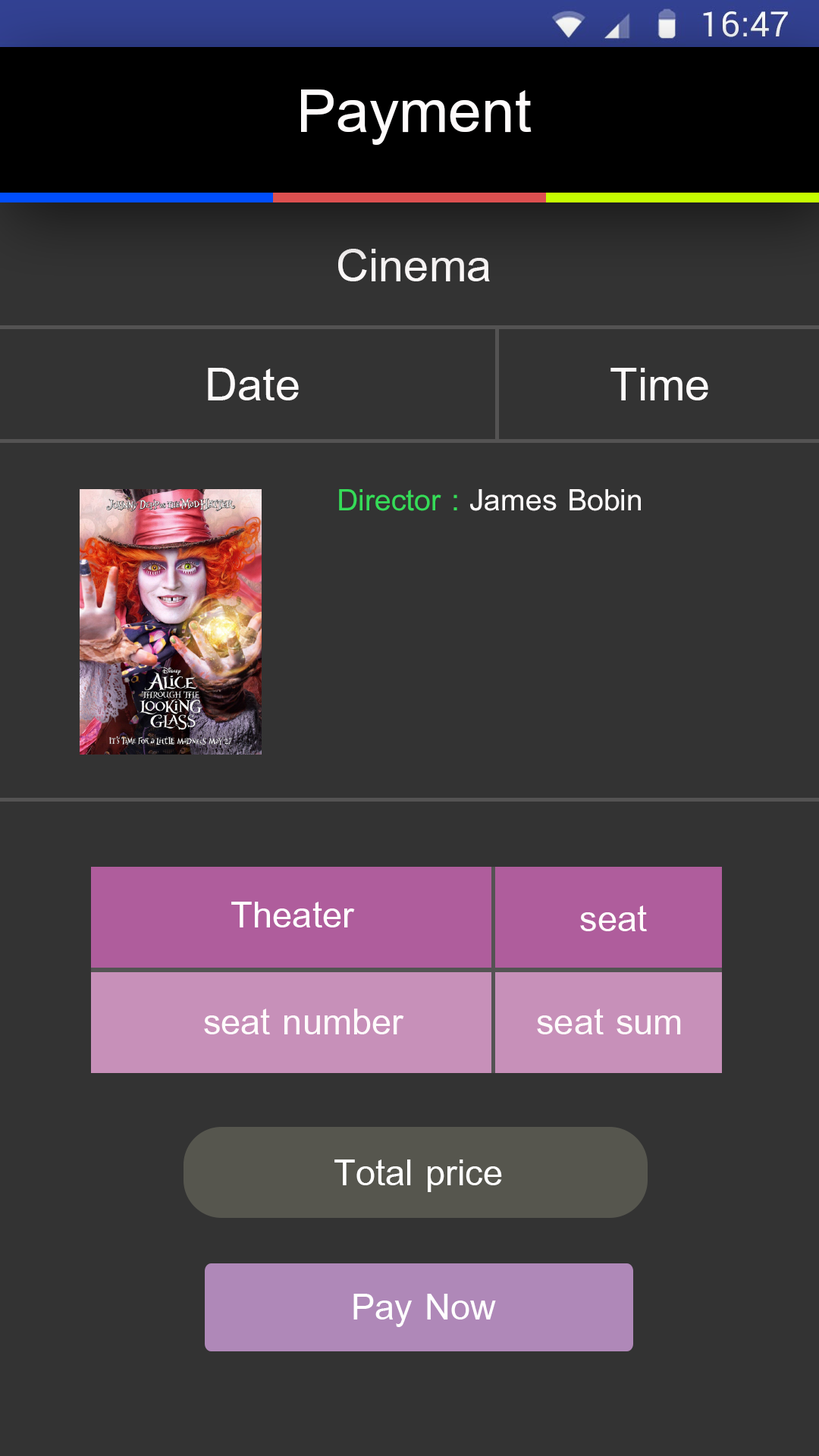
<style>
.page{position:relative;width:819px;height:1456px;background:#333333}
.page>*{position:absolute;margin:0}
.t1{font:91px "BrowalliaNew";color:#fefbfb}
.t2{font:69px "BrowalliaNew";color:#fefbfb}
.t3{font:45.4px "BrowalliaNew";color:#fefbfb}
.t4{font:45.4px "BrowalliaNew";color:#35dc58}
.t5{font:54.6px "BrowalliaNew";color:#ffffff}
.t6{font:54.6px "BrowalliaNew";color:#fefbfb}
</style>
<div class="page">
<p class="t1" style="left:301px;top:89px;width:231px;height:56px">Payment</p>
<p class="t2" style="left:338px;top:249px;width:152px;height:32px">Cinema</p>
<p class="t2" style="left:208px;top:368px;width:91px;height:32px">Date</p>
<p class="t2" style="left:610px;top:368px;width:98px;height:32px">Time</p>
<p class="t3" style="left:339px;top:489px;width:302px;height:22px"><span class="t4">Director :</span> James Bobin</p>
<p class="t5" style="left:231px;top:902px;width:124px;height:25px">Theater</p>
<p class="t6" style="left:580px;top:905px;width:67px;height:26px">seat</p>
<p class="t6" style="left:204px;top:1009px;width:200px;height:25px">seat number</p>
<p class="t6" style="left:537px;top:1009px;width:144px;height:25px">seat sum</p>
<p class="t5" style="left:334px;top:1159px;width:168px;height:33px">Total price</p>
<p class="t5" style="left:353px;top:1294px;width:143px;height:33px">Pay Now</p>
</div>
